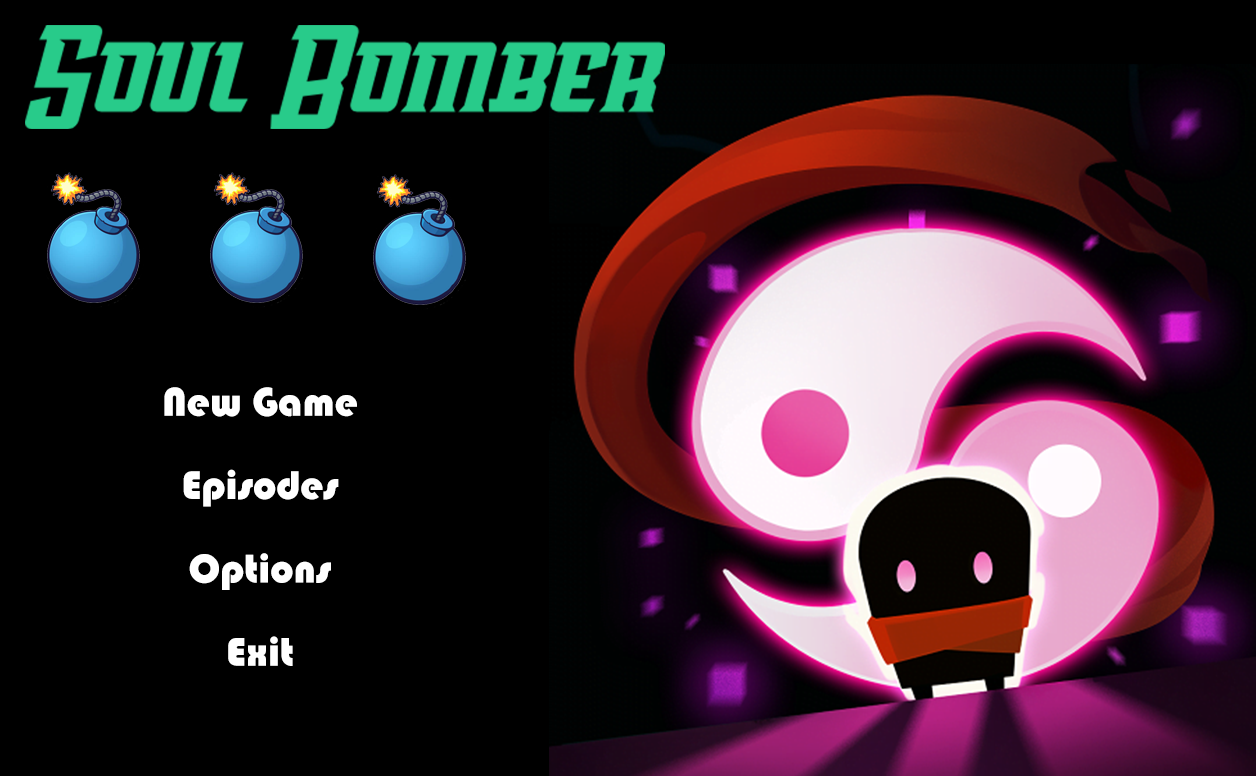
<style>
.page{position:relative;width:1256px;height:776px;background:#000000}
.page>*{position:absolute;margin:0}
.t1{font:41.7px/83.3px "Bauhaus93";color:#ffffff}
</style>
<div class="page">
<p class="t1" style="left:164px;top:387px;width:193px;height:279px;text-align:center">New Game<br>Episodes<br>Options<br>Exit</p>
</div>
